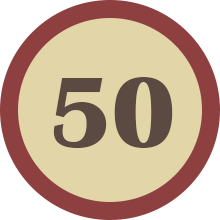
<style>
.page{position:relative;width:220px;height:220px;background:#e2d6a8}
.page>*{position:absolute;margin:0}
.t1{font:102.8px "BritannicBold";color:#5a4a42}
</style>
<div class="page">
<p class="t1" style="left:53px;top:77px;width:120px;height:71px">50</p>
</div>
